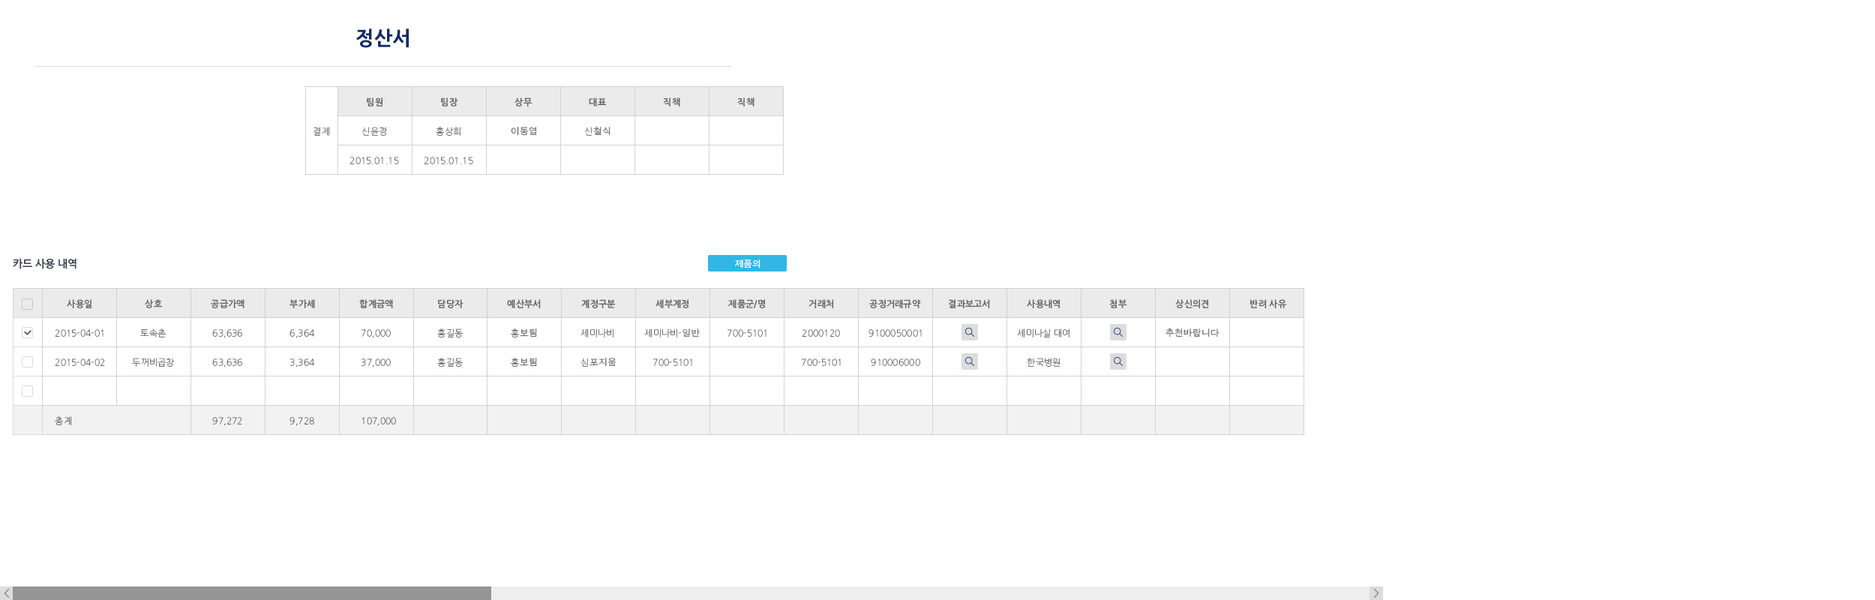
<style>
.page{position:relative;width:1875px;height:600px;background:#ffffff}
.page>*{position:absolute;margin:0}
.t1{font:19.5px "NanumGothicOTFExtraBold";color:#122b66}
.t2{font:9px "NanumGothicOTFBold";color:#666666}
.t3{font:9px "NanumGothicOTFLight";color:#666666}
.t4{font:9px "AppleGothic";color:#666666}
.t5{font:10.5px "NanumGothicOTFBold";color:#38424e}
.t6{font:9px "AppleGothic";letter-spacing:-0.025em;color:#ffffff}
.t7{font:9px "NanumGothicOTFLight"}
</style>
<div class="page">
<p class="t1" style="left:356px;top:29px;width:53px;height:19px">정산서</p>
<p class="t2" style="left:367px;top:98px;width:16px;height:9px">팀원</p>
<p class="t2" style="left:441px;top:98px;width:17px;height:9px">팀장</p>
<p class="t2" style="left:515px;top:98px;width:18px;height:9px">상무</p>
<p class="t2" style="left:589px;top:98px;width:18px;height:9px">대표</p>
<p class="t2" style="left:663px;top:98px;width:17px;height:9px">직책</p>
<p class="t2" style="left:737px;top:98px;width:18px;height:9px">직책</p>
<p class="t3" style="left:314px;top:127px;width:15px;height:9px">결제</p>
<p class="t3" style="left:362px;top:127px;width:24px;height:9px">신윤경</p>
<p class="t3" style="left:436px;top:127px;width:25px;height:9px">홍상희</p>
<p class="t4" style="left:511px;top:127px;width:25px;height:9px">이동엽</p>
<p class="t4" style="left:584px;top:127px;width:27px;height:9px"><span class="t3">신</span>철식</p>
<p class="t3" style="left:350px;top:157px;width:49px;height:7px">2015.01.15</p>
<p class="t3" style="left:424px;top:157px;width:49px;height:7px">2015.01.15</p>
<p class="t5" style="left:13px;top:258px;width:64px;height:11px">카드 사용 내역</p>
<p class="t6" style="left:735px;top:260px;width:26px;height:9px">제품의</p>
<p class="t2" style="left:67px;top:299px;width:25px;height:9px">사용일</p>
<p class="t2" style="left:145px;top:299px;width:18px;height:9px">상호</p>
<p class="t2" style="left:211px;top:299px;width:34px;height:9px">공급가액</p>
<p class="t2" style="left:290px;top:299px;width:25px;height:9px">부가세</p>
<p class="t2" style="left:359px;top:299px;width:34px;height:9px">합계금액</p>
<p class="t2" style="left:438px;top:299px;width:26px;height:9px">담당자</p>
<p class="t2" style="left:507px;top:299px;width:34px;height:9px">예산부서</p>
<p class="t2" style="left:581px;top:299px;width:35px;height:9px">계정구분</p>
<p class="t2" style="left:656px;top:299px;width:33px;height:9px">세부계정</p>
<p class="t2" style="left:728px;top:299px;width:38px;height:9px">제품군/명</p>
<p class="t2" style="left:809px;top:299px;width:25px;height:9px">거래처</p>
<p class="t2" style="left:869px;top:299px;width:52px;height:9px">공정거래규약</p>
<p class="t2" style="left:948px;top:299px;width:42px;height:9px">결과보고서</p>
<p class="t2" style="left:1027px;top:299px;width:33px;height:9px">사용내역</p>
<p class="t2" style="left:1109px;top:299px;width:18px;height:9px">첨부</p>
<p class="t2" style="left:1175px;top:299px;width:34px;height:9px">상신의견</p>
<p class="t2" style="left:1250px;top:299px;width:37px;height:9px">반려 사유</p>
<p class="t3" style="left:55px;top:329px;width:49px;height:8px">2015-04-01</p>
<p class="t3" style="left:55px;top:329px;width:49px;height:8px">2015-04-01</p>
<p class="t3" style="left:140px;top:329px;width:26px;height:9px">토속촌</p>
<p class="t3" style="left:140px;top:329px;width:26px;height:9px">토속촌</p>
<p class="t3" style="left:212px;top:329px;width:30px;height:9px">63,636</p>
<p class="t3" style="left:212px;top:329px;width:30px;height:9px">63,636</p>
<p class="t3" style="left:290px;top:329px;width:24px;height:9px">6,363</p>
<p class="t3" style="left:290px;top:329px;width:24px;height:9px">6,364</p>
<p class="t3" style="left:361px;top:329px;width:30px;height:9px">70,000</p>
<p class="t3" style="left:361px;top:329px;width:30px;height:9px">70,000</p>
<p class="t3" style="left:437px;top:329px;width:26px;height:9px">홍길동</p>
<p class="t4" style="left:511px;top:329px;width:26px;height:9px"><span class="t3">홍</span>보팀</p>
<p class="t3" style="left:581px;top:329px;width:33px;height:9px">세미나비</p>
<p class="t3" style="left:644px;top:329px;width:56px;height:9px">세미나비-<span class="t4">일반</span></p>
<p class="t3" style="left:727px;top:329px;width:40px;height:8px">700-5101</p>
<p class="t3" style="left:802px;top:329px;width:38px;height:8px">2000120</p>
<p class="t3" style="left:869px;top:329px;width:53px;height:8px">9100050001</p>
<p class="t3" style="left:1017px;top:329px;width:53px;height:9px">세미나실 대여</p>
<p class="t4" style="left:1166px;top:329px;width:54px;height:9px">추천바랍니다</p>
<p class="t3" style="left:55px;top:359px;width:49px;height:7px">2015-04-01</p>
<p class="t3" style="left:55px;top:359px;width:50px;height:7px">2015-04-02</p>
<p class="t3" style="left:132px;top:358px;width:43px;height:9px">두꺼비곱창</p>
<p class="t3" style="left:212px;top:359px;width:30px;height:9px">63,636</p>
<p class="t3" style="left:212px;top:359px;width:30px;height:9px">63,636</p>
<p class="t7" style="left:290px;top:359px;width:24px;height:9px">6,363</p>
<p class="t3" style="left:290px;top:359px;width:24px;height:9px">3,364</p>
<p class="t3" style="left:361px;top:359px;width:30px;height:9px">70,000</p>
<p class="t3" style="left:361px;top:359px;width:30px;height:9px">37,000</p>
<p class="t3" style="left:437px;top:358px;width:26px;height:9px">홍길동</p>
<p class="t4" style="left:511px;top:358px;width:26px;height:9px"><span class="t3">홍</span>보팀</p>
<p class="t4" style="left:581px;top:358px;width:36px;height:9px"><span class="t3">심</span>포지움</p>
<p class="t3" style="left:653px;top:359px;width:39px;height:7px">700-5101</p>
<p class="t3" style="left:801px;top:359px;width:40px;height:7px">700-5101</p>
<p class="t3" style="left:871px;top:359px;width:49px;height:7px">910006000</p>
<p class="t3" style="left:1027px;top:358px;width:33px;height:9px">한국병원</p>
<p class="t3" style="left:55px;top:416px;width:16px;height:9px">총계</p>
<p class="t3" style="left:212px;top:417px;width:30px;height:9px">97,272</p>
<p class="t3" style="left:290px;top:417px;width:24px;height:9px">9,728</p>
<p class="t3" style="left:362px;top:417px;width:34px;height:9px">107,000</p>
</div>
